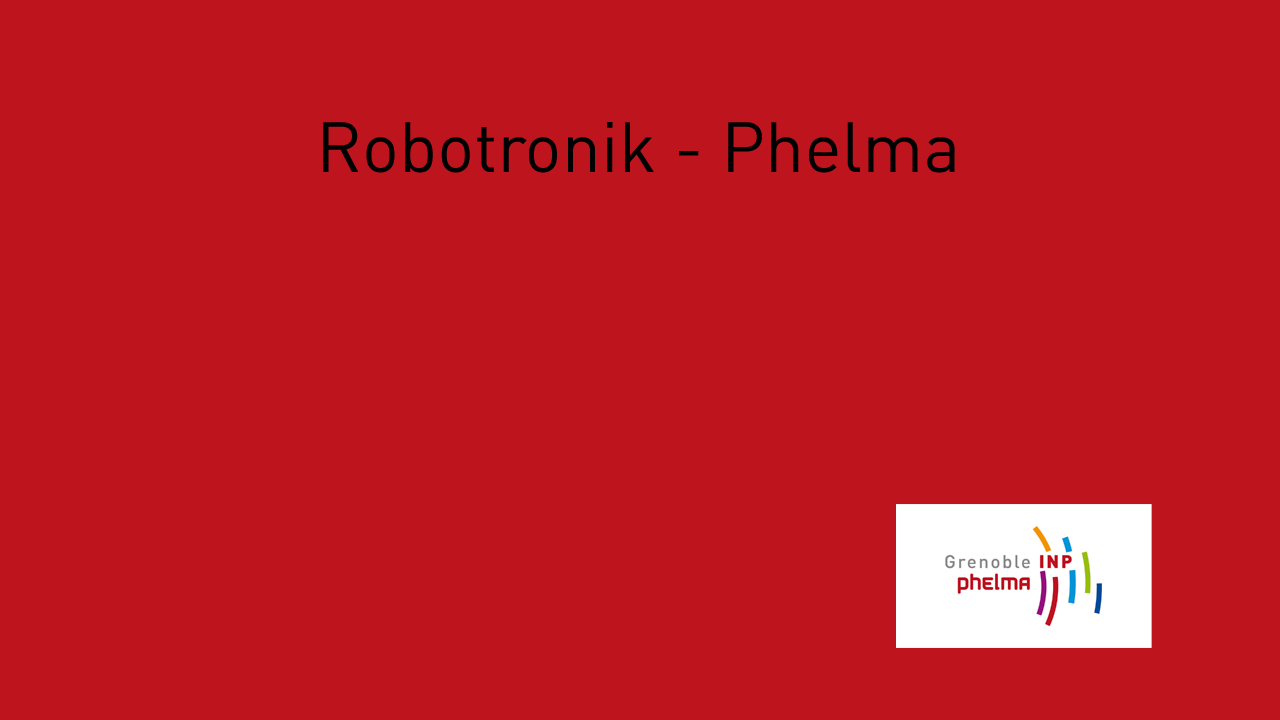
<style>
.page{position:relative;width:1280px;height:720px;background:#be141e}
.page>*{position:absolute;margin:0}
.t1{font:70px "DIN-Regular";color:#000000}
</style>
<div class="page">
<p class="t1" style="left:323px;top:122px;width:632px;height:51px">Robotronik - Phelma</p>
</div>
